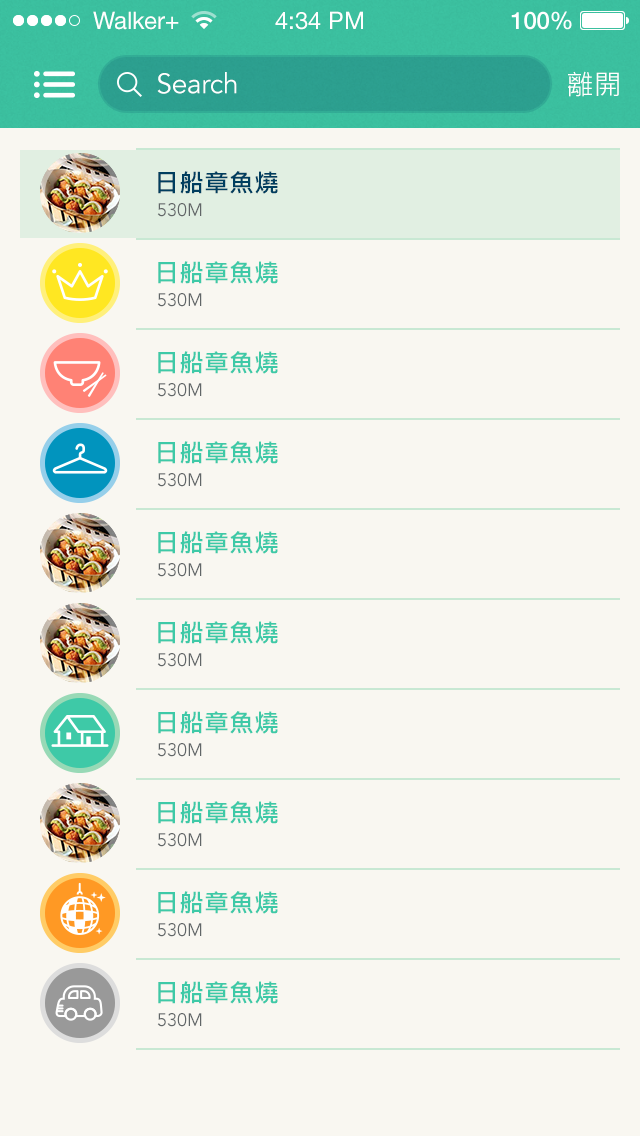
<style>
.page{position:relative;width:640px;height:1136px;background:#f9f7f1}
.page>*{position:absolute;margin:0}
.t1{font:24px "HelveticaNeueLTPro-Roman";color:#ffffff}
.t2{font:24px "HelveticaNeue-Medium";color:#ffffff}
.t3{font:28px "AvenirLT-Book";letter-spacing:-0.01em;color:#ffffff}
.t4{font:28px "MicrosoftJhengHeiRegular";letter-spacing:-0.01em;color:#ffffff}
.t5{font:25px/90px "MicrosoftJhengHeiBold";color:#3ec9a7}
.t6{font:25px/90px "MicrosoftJhengHeiBold";color:#003e5f}
.t7{font:18px/90px "AvenirLT-Book";color:#616668}
</style>
<div class="page">
<p class="t1" style="left:93px;top:11px;width:86px;height:19px">Walker+</p>
<p class="t1" style="left:275px;top:11px;width:88px;height:19px">4:34 PM</p>
<p class="t2" style="left:511px;top:11px;width:61px;height:19px">100%</p>
<p class="t3" style="left:157px;top:72px;width:80px;height:22px">Search</p>
<p class="t4" style="left:568px;top:71px;width:51px;height:26px">離開</p>
<p class="t5" style="left:158px;top:171px;width:120px;height:833px"><span class="t6">日船章魚燒<br></span>日船章魚燒<br>日船章魚燒<br>日船章魚燒<br>日船章魚燒<br>日船章魚燒<br>日船章魚燒<br>日船章魚燒<br>日船章魚燒<br>日船章魚燒</p>
<p class="t7" style="left:157px;top:203px;width:45px;height:824px">530M<br>530M<br>530M<br>530M<br>530M<br>530M<br>530M<br>530M<br>530M<br>530M</p>
</div>
